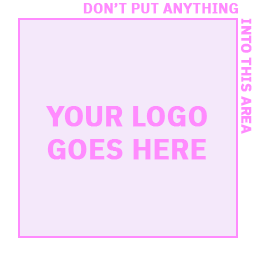
<style>
.page{position:relative;width:256px;height:256px;background:#f4e8fa}
.page>*{position:absolute;margin:0}
.t1{font:14px "IBMPlexSans-Bold";color:#ff8bfe;text-transform:uppercase;font-weight:bold}
.t2{font:28px "IBMPlexSans-Bold";color:#ff8bfe;text-transform:uppercase;font-weight:bold}
</style>
<div class="page">
<p class="t1" style="left:83px;top:3px;width:155px;height:11px">Don’t put anything</p>
<p class="t1" style="left:241px;top:18px;width:11px;height:116px;rotate:90deg">Into this area</p>
<p class="t2" style="left:46px;top:106px;width:161px;height:54px;text-align:center">Your logo goes here</p>
</div>
